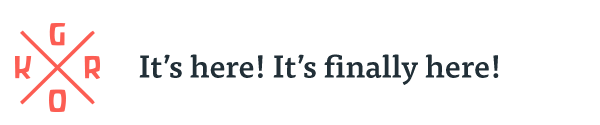
<style>
.page{position:relative;width:600px;height:125px;background:#ffffff}
.page>*{position:absolute;margin:0}
.t1{font:31.7px "TisaPro-Medi";color:#212f37}
</style>
<div class="page">
<p class="t1" style="left:139px;top:54px;width:360px;height:31px">It’s here! It’s finally here!</p>
</div>
